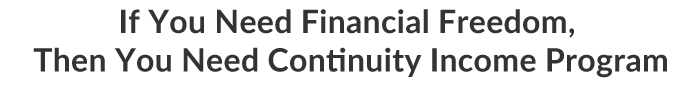
<style>
.page{position:relative;width:693px;height:85px;background:#ffffff}
.page>*{position:absolute;margin:0}
.t1{font:32px "Lato-Bold";letter-spacing:0.01em;color:#333333}
</style>
<div class="page">
<p class="t1" style="left:33px;top:9px;width:634px;height:69px;text-align:center">If You Need Financial Freedom, <br>Then You Need Continuity Income Program</p>
</div>
